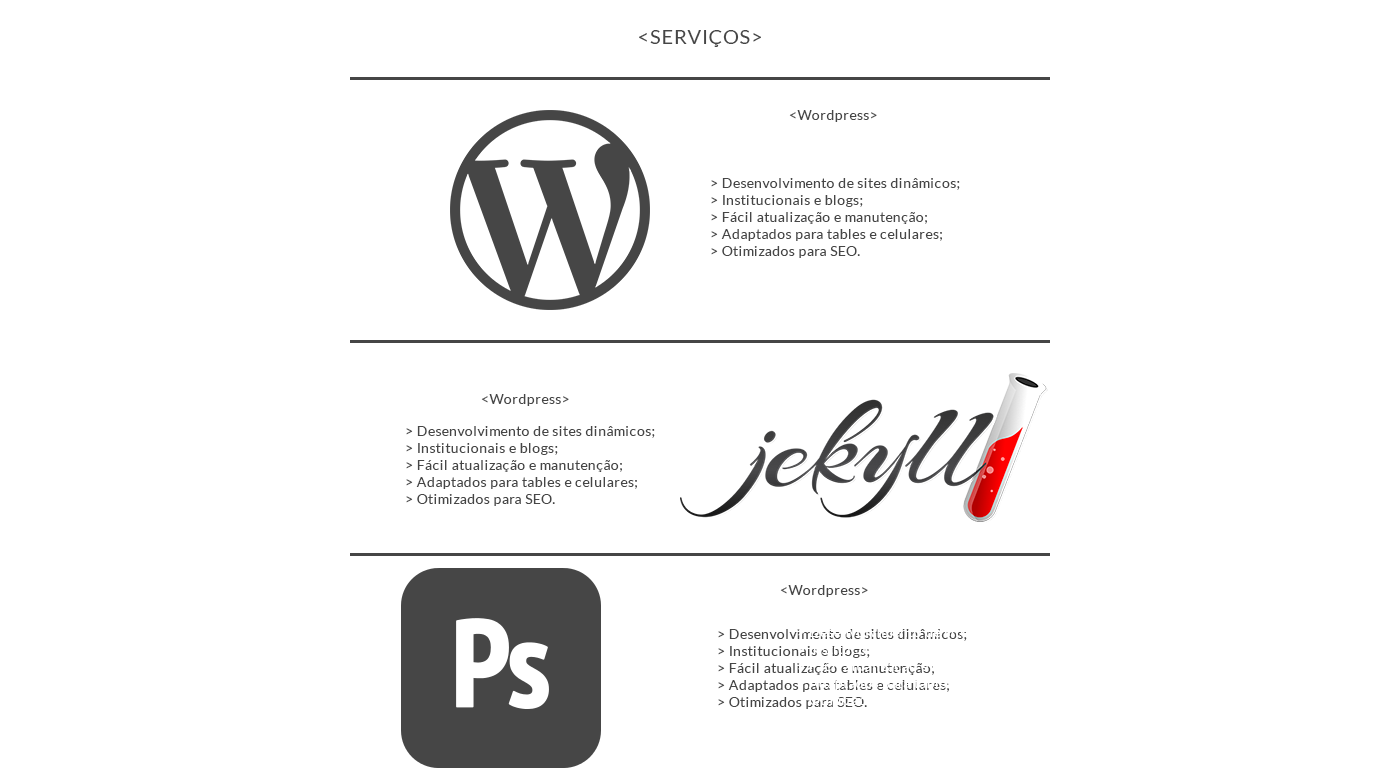
<style>
.page{position:relative;width:1400px;height:780px;background:#ffffff}
.page>*{position:absolute;margin:0}
.t1{font:20px "Lato-Regular";letter-spacing:0.025em;color:#464646}
.t2{font:14px "Lato-Regular";letter-spacing:0.025em;color:#464646}
</style>
<div class="page">
<p class="t1" style="left:639px;top:30px;width:122px;height:17px">&lt;SERVIÇOS&gt;</p>
<p class="t2" style="left:789px;top:110px;width:88px;height:12px">&lt;Wordpress&gt;</p>
<p class="t2" style="left:711px;top:178px;width:249px;height:80px">&gt; Desenvolvimento de sites dinâmicos;<br>&gt; Institucionais e blogs;<br>&gt; Fácil atualização e manutenção;<br>&gt; Adaptados para tables e celulares;<br>&gt; Otimizados para SEO.</p>
<p class="t2" style="left:481px;top:394px;width:88px;height:12px">&lt;Wordpress&gt;</p>
<p class="t2" style="left:406px;top:426px;width:249px;height:80px">&gt; Desenvolvimento de sites dinâmicos;<br>&gt; Institucionais e blogs;<br>&gt; Fácil atualização e manutenção;<br>&gt; Adaptados para tables e celulares;<br>&gt; Otimizados para SEO.</p>
<p class="t2" style="left:780px;top:585px;width:88px;height:12px">&lt;Wordpress&gt;</p>
<p class="t2" style="left:718px;top:629px;width:249px;height:80px">&gt; Desenvolvimento de sites dinâmicos;<br>&gt; Institucionais e blogs;<br>&gt; Fácil atualização e manutenção;<br>&gt; Adaptados para tables e celulares;<br>&gt; Otimizados para SEO.</p>
</div>
